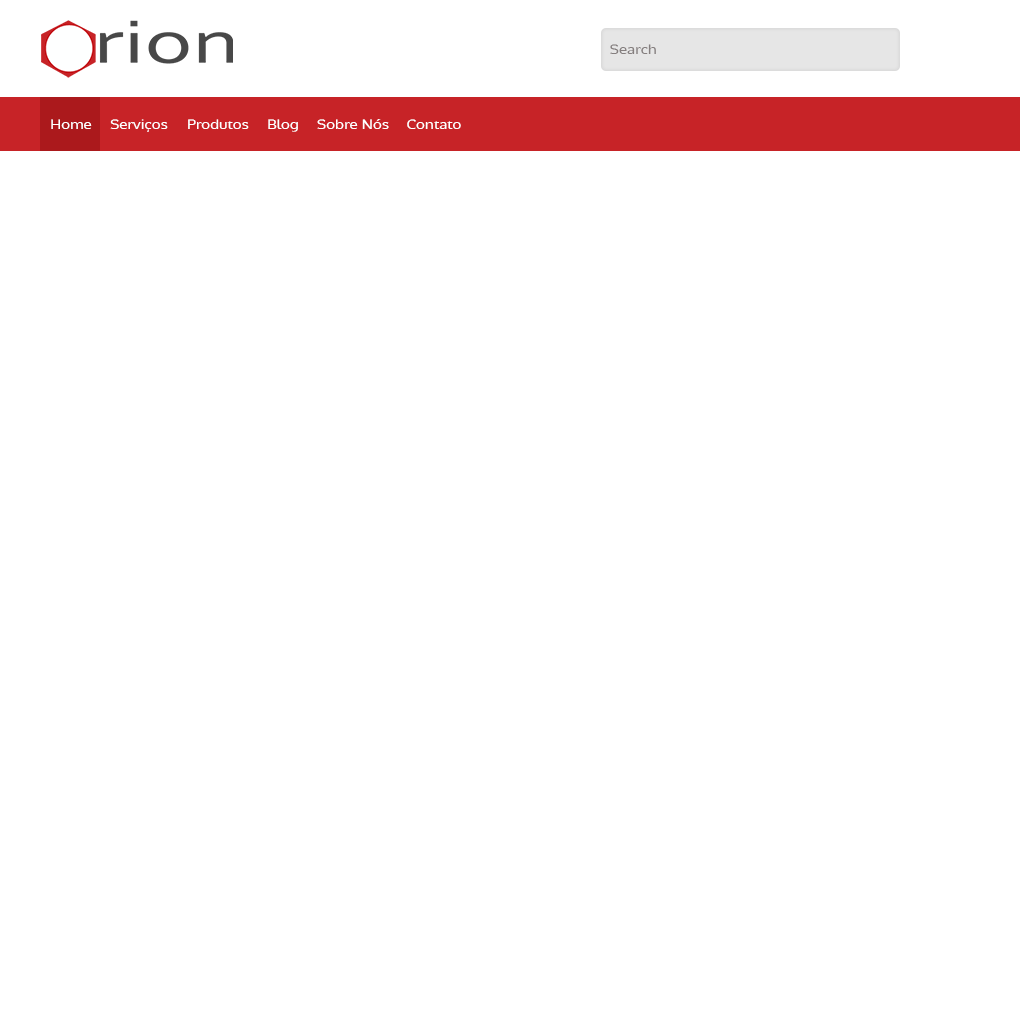
<style>
.page{position:relative;width:1020px;height:1020px;background:#ffffff}
.page>*{position:absolute;margin:0}
.t1{font:12.6px "Oxygen-Regular";color:#857f7f;scale:1.21 1}
.t2{font:12.6px "Oxygen-Regular";color:#ffffff;scale:1.21 1}
</style>
<div class="page">
<p class="t1" style="left:610px;top:44px;width:46px;height:10px">Search</p>
<p class="t2" style="left:51px;top:119px;width:41px;height:10px">Home</p>
<p class="t2" style="left:110px;top:119px;width:58px;height:13px">Serviços</p>
<p class="t2" style="left:188px;top:119px;width:61px;height:10px">Produtos</p>
<p class="t2" style="left:268px;top:119px;width:30px;height:13px">Blog</p>
<p class="t2" style="left:317px;top:119px;width:72px;height:10px">Sobre Nós</p>
<p class="t2" style="left:407px;top:119px;width:54px;height:10px">Contato</p>
</div>
